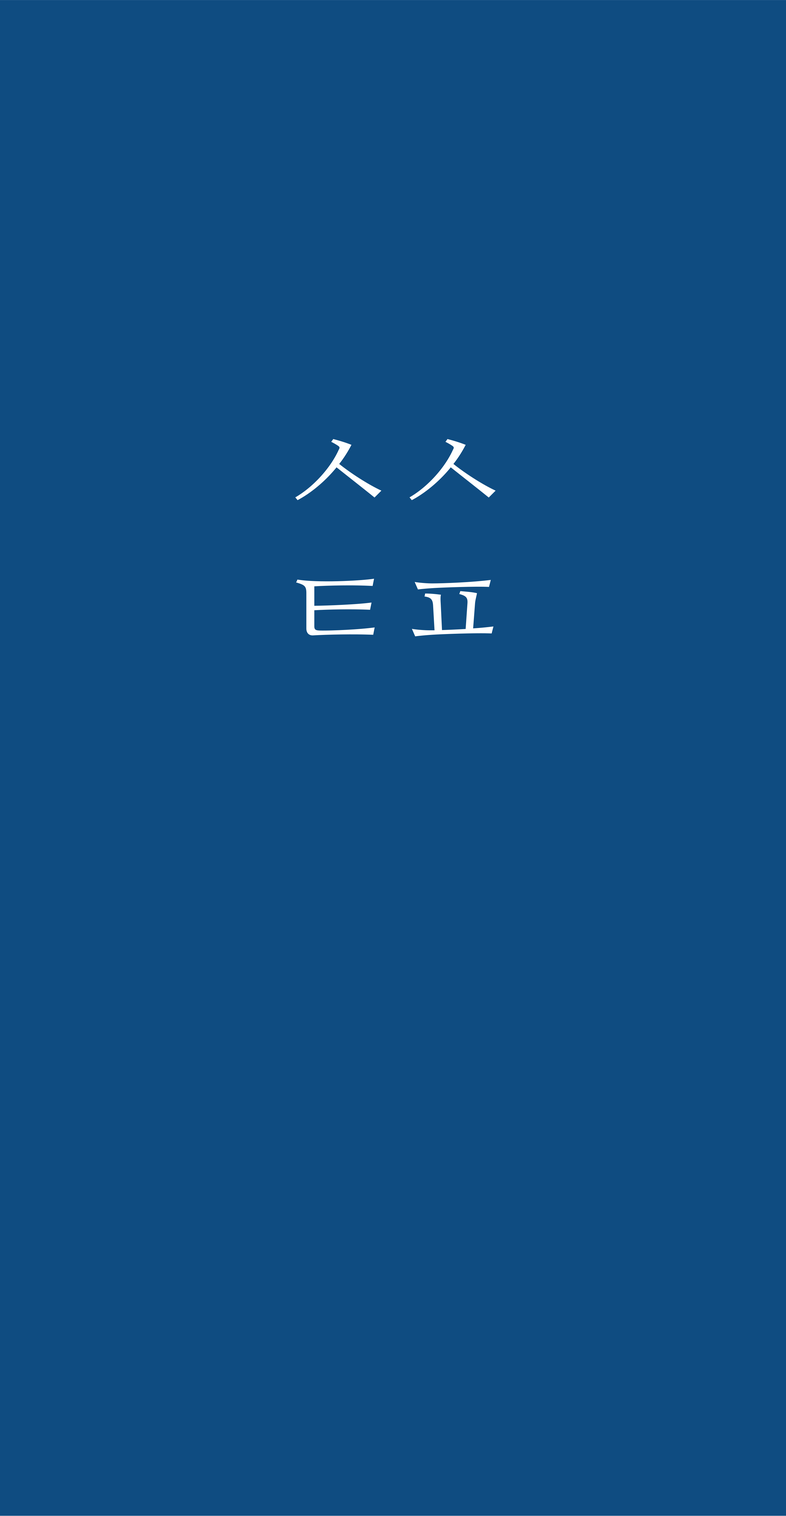
<style>
.page{position:relative;width:786px;height:1516px;background:#0f4c81}
.page>*{position:absolute;margin:0}
.t1{font:120.3px "NanumMyeongjoOTF";color:#ffffff}
</style>
<div class="page">
<p class="t1" style="left:295px;top:439px;width:201px;height:61px">ㅅㅅ</p>
<p class="t1" style="left:296px;top:579px;width:198px;height:57px">ㅌㅍ</p>
</div>
